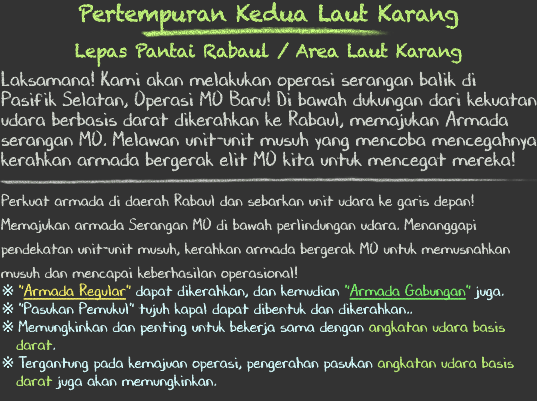
<style>
.page{position:relative;width:537px;height:401px;background:#333333}
.page>*{position:absolute;margin:0}
.t1{font:18px/36px "Chalkduster";letter-spacing:-0.04em;color:#b7e674}
.t2{font:22px/36px "Chalkduster";letter-spacing:-0.04em;color:#b7e674}
.t3{font:20px/20px "DJBChalkItUp";color:#d9ded6}
.t4{font:16px/18px "DJBChalkItUp";color:#d9ded6}
.t5{font:16px/24px "DJBChalkItUp";color:#d9ded6}
.t6{font:16px/18px "TimesNewRomanPSMT";color:#d7feff}
.t7{font:16px/18px "DJBChalkItUp";color:#f5ed68}
.t8{font:16px/18px "DJBChalkItUp";color:#f5ed68;text-decoration:underline}
.t9{font:16px/18px "DJBChalkItUp";color:#d7feff}
.t10{font:16px/18px "DJBChalkItUp";color:#7bf26b}
.t11{font:16px/18px "DJBChalkItUp";color:#7bf26b;text-decoration:underline}
.t12{font:16px/18px "DJBChalkItUp";color:#bdef78}
</style>
<div class="page">
<p class="t1" style="left:75px;top:2px;width:387px;height:65px;text-align:center"><span class="t2">Pertempuran Kedua Laut Karang<br></span>Lepas Pantai Rabaul / Area Laut Karang</p>
<p class="t3" style="left:1px;top:70px;width:536px;height:321px">Laksamana! Kami akan melakukan operasi serangan balik di <br>Pasifik Selatan, Operasi MO Baru! Di bawah dukungan dari kekuatan<br>udara berbasis darat dikerahkan ke Rabaul, memajukan Armada<br>serangan MO. Melawan unit-unit musuh yang mencoba mencegahnya<br>kerahkan armada bergerak elit MO kita untuk mencegat mereka!<br><br><span class="t4">Perkuat armada di daerah Rabaul dan sebarkan unit udara ke garis depan</span><span class="t5">!<br>Memajukan armada Serangan MO di bawah perlindungan udara. Menanggapi <br>pendekatan unit-unit musuh, kerahkan armada bergerak MO untuk memusnahkan <br>musuh dan mencapai keberhasilan operasional!<br></span><span class="t6">※ </span><span class="t7">"</span><span class="t8">Armada Regular</span><span class="t7">" </span><span class="t9">dapat dikerahkan, dan kemudian </span><span class="t10">"</span><span class="t11">Armada Gabungan</span><span class="t10">" </span><span class="t9">juga.<br></span><span class="t6">※ </span><span class="t9">"Pasukan Pemukul" tujuh kapal dapat dibentuk dan dikerahkan..<br></span><span class="t6">※ </span><span class="t9">Memungkinkan dan penting untuk bekerja sama dengan </span><span class="t12">angkatan udara basis<br>   darat</span><span class="t9">.<br></span><span class="t6">※ </span><span class="t9">Tergantung pada kemajuan operasi, pengerahan pasukan </span><span class="t12">angkatan udara basis<br>   darat </span><span class="t9">juga akan memungkinkan.</span></p>
</div>
